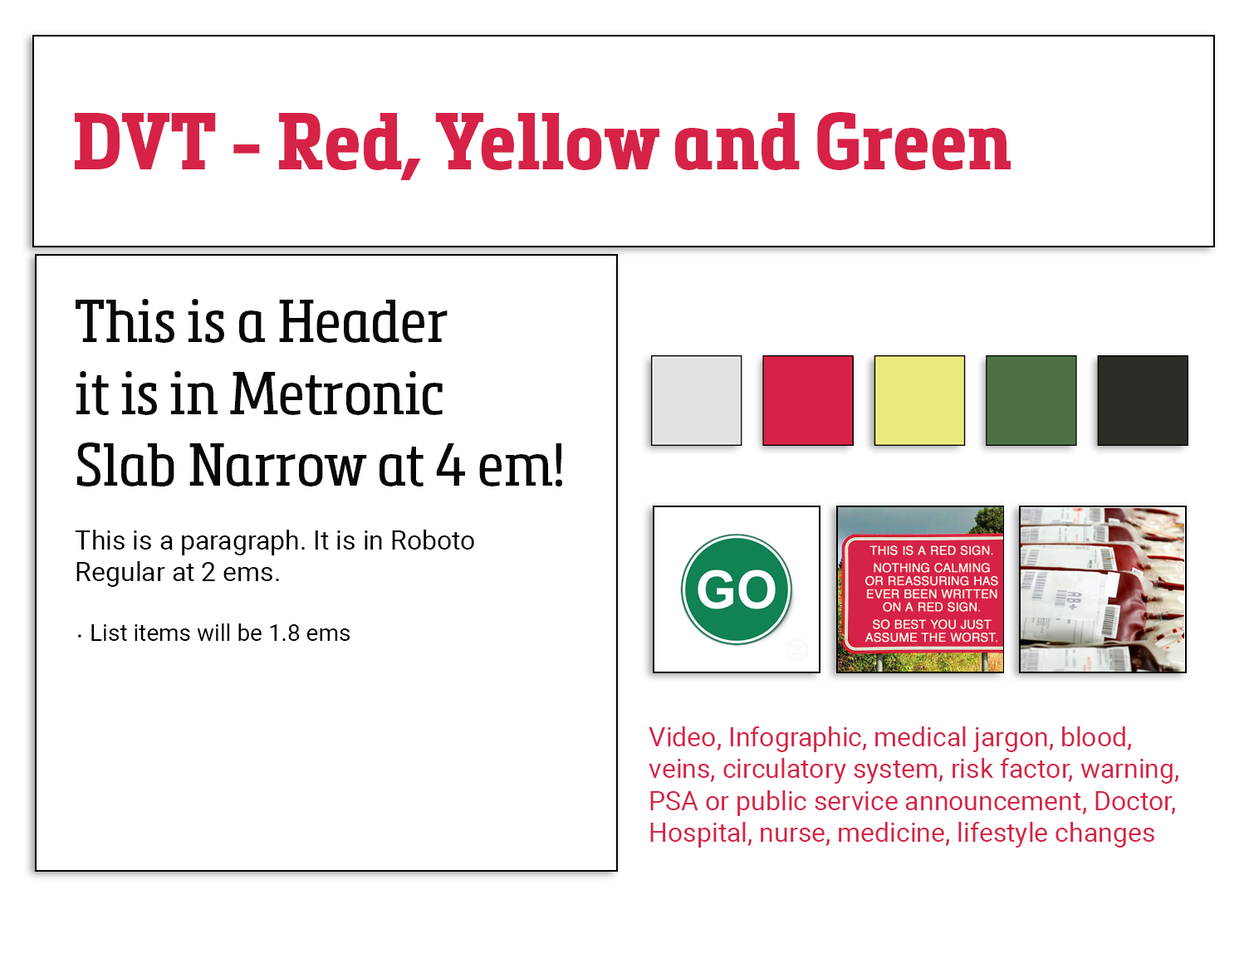
<style>
.page{position:relative;width:1244px;height:958px;background:#ffffff}
.page>*{position:absolute;margin:0}
.t1{font:79.7px "MetronicSlabNarrowBold";color:#d62246}
.t2{font:59.8px "MetronicSlabNarrowRegular";color:#080808}
.t3{font:26.6px "Roboto-Regular";color:#000000}
.t4{font:23.3px "MetallophileSp8-Light";color:#000000}
.t5{font:23.3px "Roboto-Regular";color:#000000}
.t6{font:26.6px "Roboto-Regular";color:#d62246}
</style>
<div class="page">
<p class="t1" style="left:75px;top:112px;width:936px;height:68px">DVT - Red, Yellow and Green</p>
<p class="t2" style="left:75px;top:299px;width:487px;height:342px">This is a Header <br>it is in Metronic <br>Slab Narrow at 4 em!<br><br><span class="t3">This is a paragraph. It is in Roboto <br>Regular at 2 ems.<br><br></span><span class="t4">· </span><span class="t5">List items will be 1.8 ems</span></p>
<p class="t6" style="left:649px;top:727px;width:530px;height:121px">Video, Infographic, medical jargon, blood, <br>veins, circulatory system, risk factor, warning, <br>PSA or public service announcement, Doctor, <br>Hospital, nurse, medicine, lifestyle changes</p>
</div>
